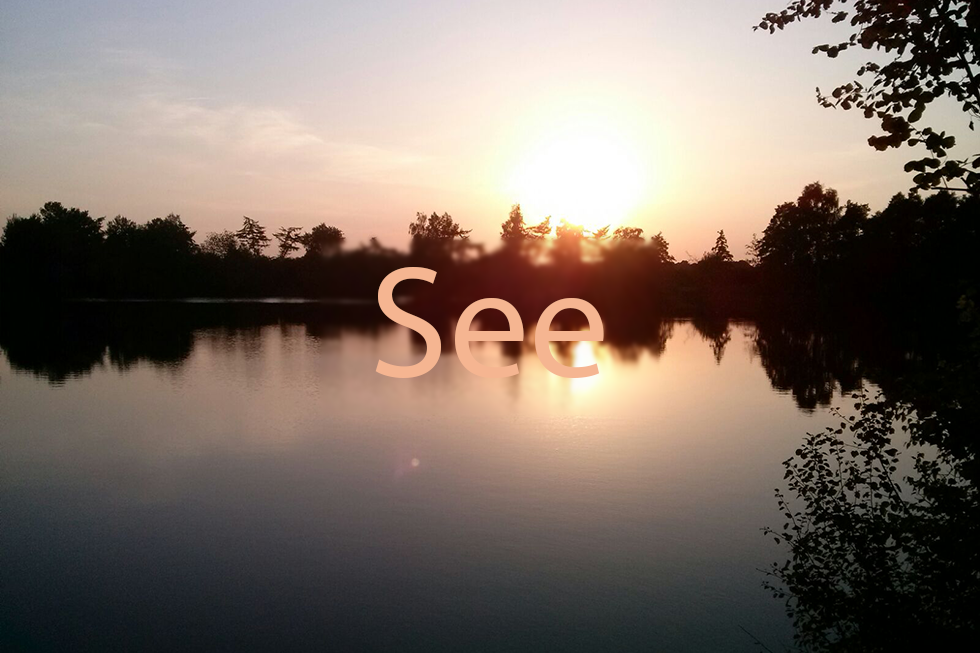
<style>
.page{position:relative;width:980px;height:653px}
.page>*{position:absolute;margin:0}
.t1{font:160px "MyriadPro-Regular";color:#f5b591}
</style>
<div class="page">
<p class="t1" style="left:375px;top:267px;width:229px;height:111px">See</p>
</div>
